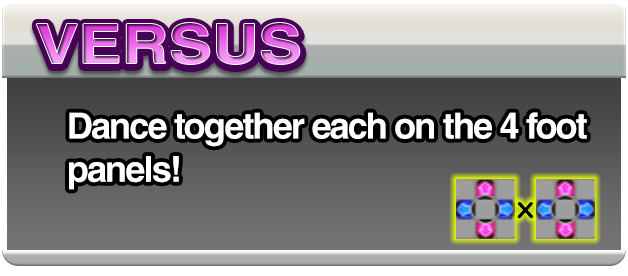
<style>
.page{position:relative;width:628px;height:276px}
.page>*{position:absolute;margin:0}
.t1{font:36px "HelveticaLTStd-Bold";letter-spacing:-0.05em;color:#ffffff}
.t2{font:30px "GothamRounded-Medium";letter-spacing:-0.05em;color:#000000;scale:1.1 1}
</style>
<div class="page">
<p class="t1" style="left:69px;top:112px;width:518px;height:78px">Dance together each on the 4 foot<br>panels!</p>
<p class="t2" style="left:517px;top:202px;width:17px;height:17px">x</p>
</div>
